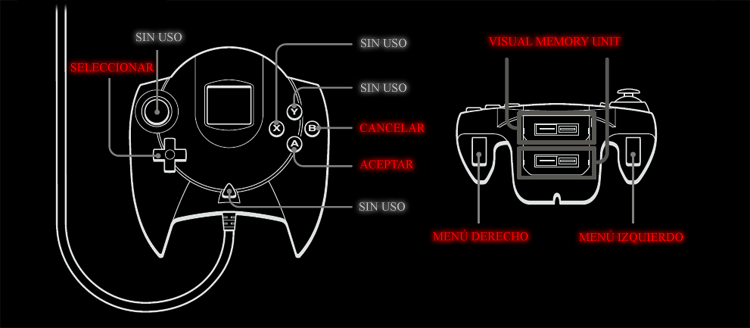
<style>
.page{position:relative;width:750px;height:328px;background:#000000}
.page>*{position:absolute;margin:0}
.t1{font:12.1px "IskoolaPota";color:#b6b6b6}
.t2{font:12.1px "IskoolaPota";color:#ff0000}
</style>
<div class="page">
<p class="t1" style="left:136px;top:32px;width:46px;height:10px">SIN USO</p>
<p class="t1" style="left:361px;top:38px;width:46px;height:10px">SIN USO</p>
<p class="t2" style="left:488px;top:37px;width:133px;height:9px">VISUAL MEMORY UNIT</p>
<p class="t2" style="left:71px;top:63px;width:83px;height:9px">SELECCIONAR</p>
<p class="t1" style="left:361px;top:83px;width:46px;height:9px">SIN USO</p>
<p class="t2" style="left:360px;top:123px;width:65px;height:9px">CANCELAR</p>
<p class="t2" style="left:359px;top:160px;width:55px;height:9px">ACEPTAR</p>
<p class="t1" style="left:359px;top:202px;width:46px;height:9px">SIN USO</p>
<p class="t2" style="left:432px;top:229px;width:96px;height:12px">MENÚ DERECHO</p>
<p class="t2" style="left:579px;top:230px;width:104px;height:14px">MENÚ IZQUIERDO</p>
</div>
